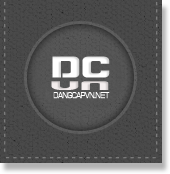
<style>
.page{position:relative;width:170px;height:174px}
.page>*{position:absolute;margin:0}
.t1{font:36px "BlasterInfinite";color:#ffffff;scale:1.2 1}
.t2{font:14.9px "BlasterInfinite";color:#f4eeee;scale:2.9 1}
.t3{font:8.9px "HP-Dan-Truong-Regular";color:#ffffff;scale:0.58 1}
</style>
<div class="page">
<p class="t1" style="left:52px;top:56px;width:58px;height:22px">DC</p>
<p class="t2" style="left:51px;top:81px;width:58px;height:9px">VN</p>
<p class="t3" style="left:53px;top:92px;width:57px;height:7px">DANGCAPVN.NET</p>
</div>
